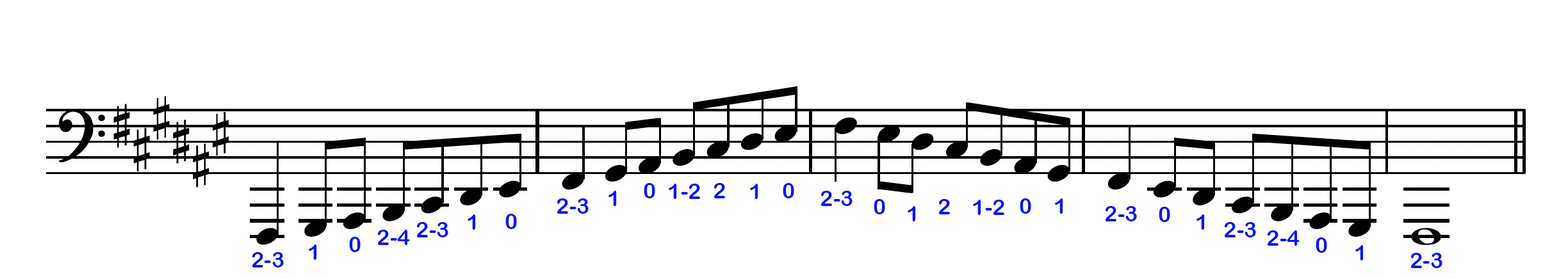
<style>
.page{position:relative;width:1568px;height:279px;background:#ffffff}
.page>*{position:absolute;margin:0}
.t1{font:21.8px "ArialRoundedMTBold";color:#0417ec}
</style>
<div class="page">
<p class="t1" style="left:644px;top:183px;width:11px;height:16px">0</p>
<p class="t1" style="left:669px;top:184px;width:31px;height:15px">1-2</p>
<p class="t1" style="left:714px;top:183px;width:11px;height:16px">2</p>
<p class="t1" style="left:750px;top:184px;width:8px;height:15px">1</p>
<p class="t1" style="left:783px;top:183px;width:11px;height:16px">0</p>
<p class="t1" style="left:608px;top:191px;width:9px;height:15px">1</p>
<p class="t1" style="left:821px;top:191px;width:32px;height:15px">2-3</p>
<p class="t1" style="left:557px;top:199px;width:32px;height:15px">2-3</p>
<p class="t1" style="left:874px;top:199px;width:11px;height:16px">0</p>
<p class="t1" style="left:908px;top:206px;width:8px;height:16px">1</p>
<p class="t1" style="left:938px;top:199px;width:12px;height:16px">2</p>
<p class="t1" style="left:973px;top:200px;width:31px;height:15px">1-2</p>
<p class="t1" style="left:1020px;top:199px;width:11px;height:15px">0</p>
<p class="t1" style="left:1055px;top:199px;width:8px;height:15px">1</p>
<p class="t1" style="left:1105px;top:206px;width:32px;height:16px">2-3</p>
<p class="t1" style="left:1159px;top:207px;width:11px;height:15px">0</p>
<p class="t1" style="left:468px;top:215px;width:8px;height:15px">1</p>
<p class="t1" style="left:505px;top:214px;width:12px;height:15px">0</p>
<p class="t1" style="left:1196px;top:215px;width:9px;height:15px">1</p>
<p class="t1" style="left:377px;top:230px;width:33px;height:15px">2-4</p>
<p class="t1" style="left:416px;top:222px;width:32px;height:16px">2-3</p>
<p class="t1" style="left:1224px;top:222px;width:32px;height:16px">2-3</p>
<p class="t1" style="left:1267px;top:231px;width:33px;height:15px">2-4</p>
<p class="t1" style="left:309px;top:245px;width:8px;height:15px">1</p>
<p class="t1" style="left:349px;top:237px;width:12px;height:15px">0</p>
<p class="t1" style="left:1316px;top:238px;width:11px;height:15px">0</p>
<p class="t1" style="left:1355px;top:245px;width:9px;height:16px">1</p>
<p class="t1" style="left:252px;top:252px;width:32px;height:16px">2-3</p>
<p class="t1" style="left:1410px;top:253px;width:32px;height:15px">2-3</p>
</div>
